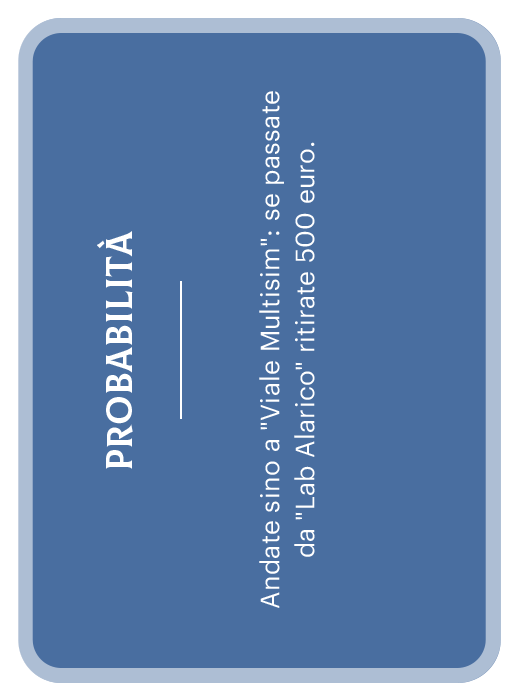
<style>
.page{position:relative;width:527px;height:700px;background:#496ea0}
.page>*{position:absolute;margin:0}
.t1{font:26px "Graphik-Regular";letter-spacing:0.01em;color:#ffffff}
.t2{font:36px "Colus-Regular";letter-spacing:0.01em;color:#ffffff;text-transform:uppercase}
</style>
<div class="page">
<p class="t1" style="left:259px;top:91px;width:56px;height:517px;rotate:-90deg">Andate sino a "Viale Multisim": se passate da "Lab Alarico" ritirate 500 euro.</p>
<p class="t2" style="left:97px;top:231px;width:36px;height:238px;rotate:-90deg">probabilità</p>
</div>
